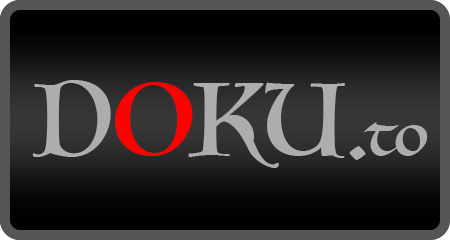
<style>
.page{position:relative;width:450px;height:240px}
.page>*{position:absolute;margin:0}
.t1{font:100px "Luminari-Regular";color:#adadad}
.t2{font:100px "Luminari-Regular";color:#ff0000}
.t3{font:60px "Luminari-Regular";color:#adadad}
</style>
<div class="page">
<p class="t1" style="left:32px;top:80px;width:396px;height:88px">D<span class="t2">O</span>KU.<span class="t3">to</span></p>
</div>
